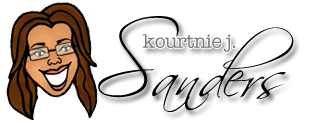
<style>
.page{position:relative;width:312px;height:123px;background:#ffffff}
.page>*{position:absolute;margin:0}
.t1{font:59.9px "Scriptina";letter-spacing:-0.025em;color:#000000}
.t2{font:95px "Scriptina";letter-spacing:-0.025em;color:#000000}
.t3{font:20px "AmericanTypewriter";letter-spacing:-0.025em;color:#797979}
</style>
<div class="page">
<p class="t1" style="left:98px;top:16px;width:196px;height:96px"><span class="t2">S</span>anders</p>
<p class="t3" style="left:142px;top:34px;width:94px;height:18px">kourtnie j.</p>
</div>
